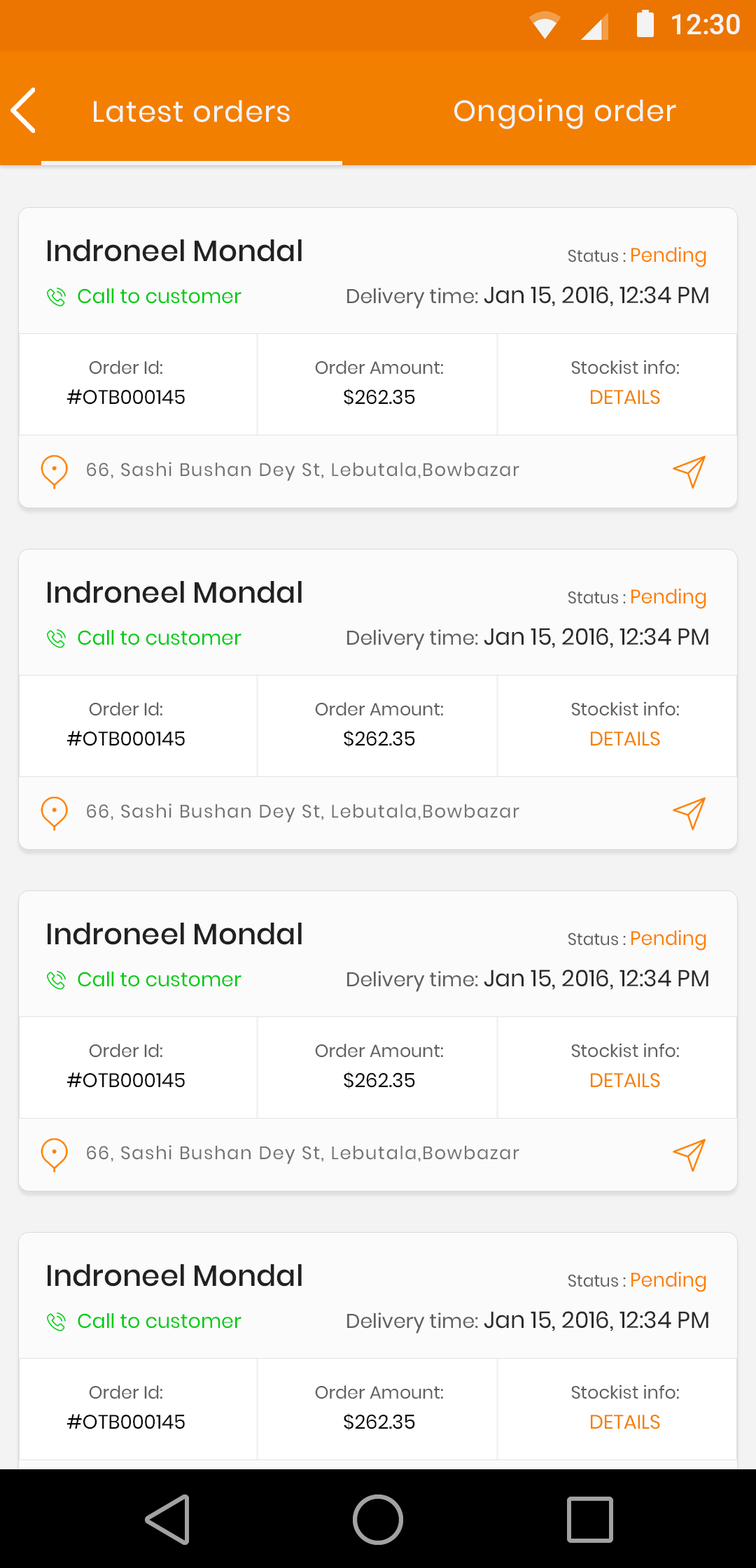
<style>
.page{position:relative;width:756px;height:1568px;background:#fbfbfb}
.page>*{position:absolute;margin:0}
.t1{font:28.8px "Roboto-Medium";color:#ffffff}
.t2{font:29.2px "Poppins-Regular";letter-spacing:0.025em;color:#ffffff}
.t3{font:29.2px "Poppins-Regular";letter-spacing:0.025em;color:#fffefe}
.t4{font:29.4px "Poppins-Medium";color:#212121}
.t5{font:29.4px "Poppins-Medium";color:#212121;text-transform:uppercase}
.t6{font:16.8px "Poppins-Regular";color:#606060}
.t7{font:19.5px "Poppins-Regular";color:#ff7f00}
.t8{font:19.9px "Poppins-Regular";color:#00cc13}
.t9{font:23.1px "Poppins-Regular";color:#2b2b2b}
.t10{font:19.9px "Poppins-Regular";color:#606060}
.t11{font:23.1px "Poppins-Regular";color:#2b2b2b;text-transform:uppercase}
.t12{font:17.7px "Poppins-Regular";color:#606060}
.t13{font:17.7px "Poppins-Regular";color:#606060;text-transform:uppercase}
.t14{font:19.6px "Poppins-Regular";color:#090909;text-transform:uppercase}
.t15{font:19.6px "Poppins-Regular";color:#f37f00;text-transform:uppercase}
.t16{font:18.2px "Poppins-Regular";letter-spacing:0.06em;color:#737373}
</style>
<div class="page">
<p class="t1" style="left:672px;top:14px;width:68px;height:20px">12:30</p>
<p class="t2" style="left:94px;top:100px;width:196px;height:22px">Latest orders</p>
<p class="t3" style="left:454px;top:99px;width:222px;height:31px">Ongoing order</p>
<p class="t4" style="left:48px;top:239px;width:254px;height:23px"><span class="t5">I</span>ndroneel Mondal</p>
<p class="t6" style="left:568px;top:246px;width:138px;height:21px">Status : <span class="t7">Pending</span></p>
<p class="t8" style="left:78px;top:288px;width:163px;height:16px">Call to customer</p>
<p class="t9" style="left:347px;top:286px;width:361px;height:23px"><span class="t10">Delivery time: </span><span class="t11">j</span>an 15, 2016, 12:34 PM</p>
<p class="t12" style="left:89px;top:360px;width:73px;height:14px"><span class="t13">o</span>rder <span class="t13">i</span>d<span class="t13">:</span></p>
<p class="t12" style="left:315px;top:360px;width:128px;height:14px"><span class="t13">o</span>rder Amount:</p>
<p class="t12" style="left:571px;top:360px;width:108px;height:14px">Stockist info:</p>
<p class="t14" style="left:66px;top:389px;width:119px;height:16px">#oTB000145</p>
<p class="t14" style="left:344px;top:388px;width:71px;height:18px">$262.35</p>
<p class="t15" style="left:591px;top:390px;width:69px;height:15px">details</p>
<p class="t16" style="left:87px;top:462px;width:432px;height:19px">66, Sashi Bushan Dey St, Lebutala,Bowbazar</p>
<p class="t4" style="left:48px;top:581px;width:254px;height:22px"><span class="t5">I</span>ndroneel Mondal</p>
<p class="t6" style="left:568px;top:588px;width:138px;height:21px">Status : <span class="t7">Pending</span></p>
<p class="t8" style="left:78px;top:630px;width:163px;height:15px">Call to customer</p>
<p class="t9" style="left:347px;top:628px;width:361px;height:22px"><span class="t10">Delivery time: </span><span class="t11">j</span>an 15, 2016, 12:34 PM</p>
<p class="t12" style="left:571px;top:701px;width:108px;height:15px">Stockist info:</p>
<p class="t12" style="left:89px;top:702px;width:73px;height:14px"><span class="t13">o</span>rder <span class="t13">i</span>d<span class="t13">:</span></p>
<p class="t12" style="left:315px;top:702px;width:128px;height:14px"><span class="t13">o</span>rder Amount:</p>
<p class="t14" style="left:66px;top:731px;width:119px;height:15px">#oTB000145</p>
<p class="t14" style="left:344px;top:729px;width:71px;height:19px">$262.35</p>
<p class="t15" style="left:591px;top:732px;width:69px;height:14px">details</p>
<p class="t16" style="left:87px;top:804px;width:432px;height:18px">66, Sashi Bushan Dey St, Lebutala,Bowbazar</p>
<p class="t4" style="left:48px;top:923px;width:254px;height:22px"><span class="t5">I</span>ndroneel Mondal</p>
<p class="t6" style="left:568px;top:930px;width:138px;height:21px">Status : <span class="t7">Pending</span></p>
<p class="t8" style="left:78px;top:972px;width:163px;height:15px">Call to customer</p>
<p class="t9" style="left:347px;top:969px;width:361px;height:23px"><span class="t10">Delivery time: </span><span class="t11">j</span>an 15, 2016, 12:34 PM</p>
<p class="t12" style="left:89px;top:1044px;width:73px;height:14px"><span class="t13">o</span>rder <span class="t13">i</span>d<span class="t13">:</span></p>
<p class="t12" style="left:315px;top:1044px;width:128px;height:14px"><span class="t13">o</span>rder Amount:</p>
<p class="t12" style="left:571px;top:1043px;width:108px;height:15px">Stockist info:</p>
<p class="t14" style="left:66px;top:1072px;width:119px;height:16px">#oTB000145</p>
<p class="t14" style="left:344px;top:1071px;width:71px;height:18px">$262.35</p>
<p class="t15" style="left:591px;top:1073px;width:69px;height:15px">details</p>
<p class="t16" style="left:87px;top:1145px;width:432px;height:19px">66, Sashi Bushan Dey St, Lebutala,Bowbazar</p>
<p class="t4" style="left:48px;top:1264px;width:254px;height:23px"><span class="t5">I</span>ndroneel Mondal</p>
<p class="t6" style="left:568px;top:1271px;width:138px;height:21px">Status : <span class="t7">Pending</span></p>
<p class="t8" style="left:78px;top:1313px;width:163px;height:16px">Call to customer</p>
<p class="t9" style="left:347px;top:1311px;width:361px;height:23px"><span class="t10">Delivery time: </span><span class="t11">j</span>an 15, 2016, 12:34 PM</p>
<p class="t12" style="left:89px;top:1385px;width:73px;height:14px"><span class="t13">o</span>rder <span class="t13">i</span>d<span class="t13">:</span></p>
<p class="t12" style="left:315px;top:1385px;width:128px;height:14px"><span class="t13">o</span>rder Amount:</p>
<p class="t12" style="left:571px;top:1385px;width:108px;height:14px">Stockist info:</p>
<p class="t14" style="left:66px;top:1414px;width:119px;height:15px">#oTB000145</p>
<p class="t14" style="left:344px;top:1413px;width:71px;height:18px">$262.35</p>
<p class="t15" style="left:591px;top:1415px;width:69px;height:14px">details</p>
</div>
